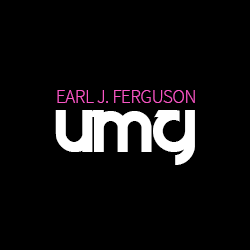
<style>
.page{position:relative;width:250px;height:250px;background:#000000}
.page>*{position:absolute;margin:0}
.t1{font:19px "SourceSansPro-Light";letter-spacing:-0.015em;color:#f857c5}
.t2{font:60px "Velocity";color:#ffffff}
</style>
<div class="page">
<p class="t1" style="left:57px;top:90px;width:138px;height:13px">EARL J. FERGUSON</p>
<p class="t2" style="left:55px;top:110px;width:140px;height:55px">UMG</p>
</div>
